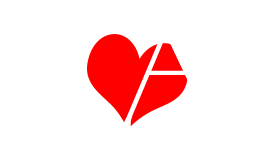
<style>
.page{position:relative;width:273px;height:154px;background:#ffffff}
.page>*{position:absolute;margin:0}
.t1{font:190px "CormorantRoman-Regular";letter-spacing:-0.01em;color:#ffffff}
</style>
<div class="page">
<p class="t1" style="left:3px;top:16px;width:135px;height:122px">A</p>
<p class="t1" style="left:104px;top:16px;width:135px;height:122px">A</p>
</div>
